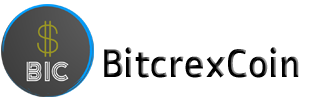
<style>
.page{position:relative;width:309px;height:100px;background:#ffffff}
.page>*{position:absolute;margin:0}
.t1{font:39.2px "Alef-Bold";letter-spacing:-0.01em;scale:0.9 1}
</style>
<div class="page">
<p class="t1" style="left:104px;top:47px;width:195px;height:31px">BitcrexCoin</p>
</div>
